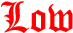
<style>
.page{position:relative;width:73px;height:33px;background:#ffffff}
.page>*{position:absolute;margin:0}
.t1{font:45px "CloisterBlack-Light";color:#ff0000}
</style>
<div class="page">
<p class="t1" style="left:1px;top:1px;width:72px;height:33px">Low</p>
</div>
